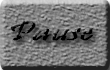
<style>
.page{position:relative;width:110px;height:70px}
.page>*{position:absolute;margin:0}
.t1{font:29px "Pristina-Regular";font-weight:bold;scale:1.46 1}
</style>
<div class="page">
<p class="t1" style="left:10px;top:20px;width:83px;height:21px">Pause</p>
</div>
